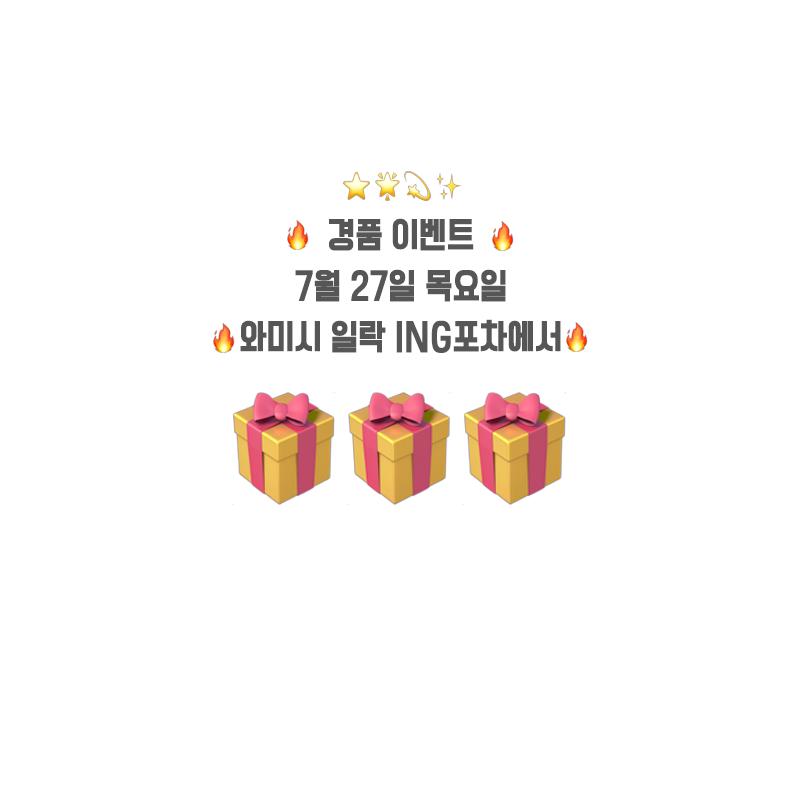
<style>
.page{position:relative;width:800px;height:800px;background:#ffffff}
.page>*{position:absolute;margin:0}
.t1{font:33px/51px "OTManbalchungchunB";letter-spacing:0.02em;color:#565656;scale:0.91 1}
</style>
<div class="page">
<p class="t1" style="left:240px;top:218px;width:321px;height:135px;text-align:center">경품 이벤트<br>7월 27일 목요일<br>와미시 일락 ING포차에서</p>
</div>
